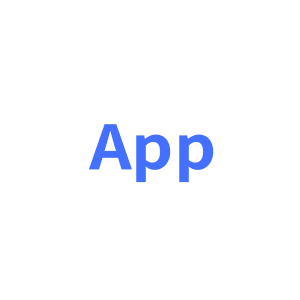
<style>
.page{position:relative;width:300px;height:300px;background:#ffffff}
.page>*{position:absolute;margin:0}
.t1{font:60px "SourceHanSansCNVF-Bold";color:#4370ff;scale:1.1 1}
</style>
<div class="page">
<p class="t1" style="left:88px;top:124px;width:126px;height:59px">App</p>
</div>
